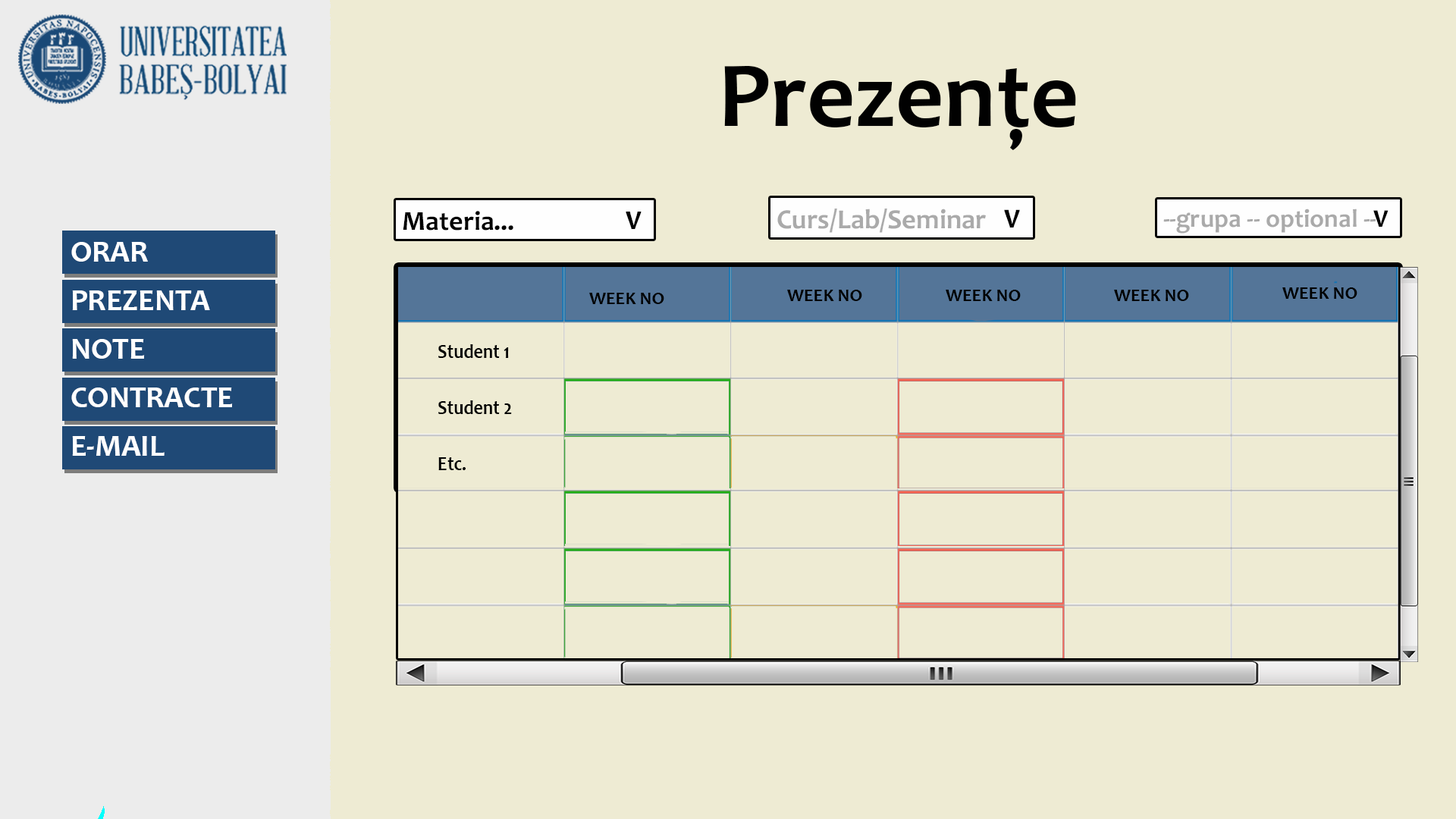
<style>
.page{position:relative;width:1456px;height:819px;background:#eeebd3}
.page>*{position:absolute;margin:0}
.t1{font:94.3px "Candara-Bold";color:#000000}
.t2{font:27.8px "Candara-Bold";color:#aaaaaa}
.t3{font:27.8px "Candara-Bold";color:#000000}
.t4{font:25.6px "Candara-Bold";color:#aaaaaa}
.t5{font:27.2px "Candara-Bold";color:#000000}
.t6{font:25.6px "Candara-Bold";color:#000000}
.t7{font:30px/48.4px "Candara-Bold";color:#ffffff;scale:1.03 1}
.t8{font:18.2px "Candara-Bold";color:#000000}
.t9{font:19.9px/55.9px "Candara-Bold";color:#000000;scale:0.91 1}
</style>
<div class="page">
<p class="t1" style="left:724px;top:66px;width:352px;height:84px">Prezențe</p>
<p class="t2" style="left:777px;top:209px;width:209px;height:24px">Curs/Lab/Seminar</p>
<p class="t3" style="left:1004px;top:209px;width:16px;height:18px">V</p>
<p class="t4" style="left:1163px;top:209px;width:213px;height:25px">--grupa -- optional --</p>
<p class="t5" style="left:403px;top:211px;width:110px;height:20px">Materia...</p>
<p class="t5" style="left:626px;top:212px;width:16px;height:17px">V</p>
<p class="t6" style="left:1373px;top:210px;width:15px;height:17px">V</p>
<p class="t7" style="left:71px;top:242px;width:162px;height:214px">ORAR<br>PREZENTA<br>NOTE<br>CONTRACTE<br>E-MAIL</p>
<p class="t8" style="left:589px;top:293px;width:75px;height:11px">WEEK NO</p>
<p class="t8" style="left:787px;top:290px;width:75px;height:11px">WEEK NO</p>
<p class="t8" style="left:946px;top:290px;width:75px;height:11px">WEEK NO</p>
<p class="t8" style="left:1114px;top:290px;width:75px;height:11px">WEEK NO</p>
<p class="t8" style="left:1282px;top:287px;width:75px;height:12px">WEEK NO</p>
<p class="t9" style="left:438px;top:344px;width:74px;height:126px">Student 1<br>Student 2<br>Etc.</p>
</div>
